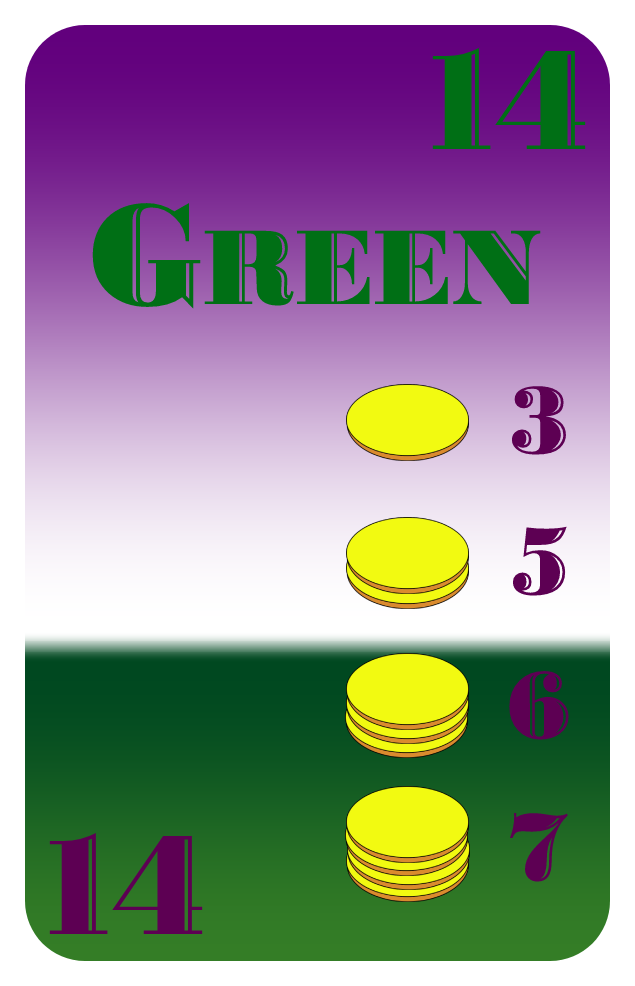
<style>
.page{position:relative;width:635px;height:986px}
.page>*{position:absolute;margin:0}
.t1{font:150px "BodoniHighlightICG";color:#006f15}
.t2{font:112px "BodoniHighlightICG";color:#006f15}
.t3{font:100px "BodoniHighlightICG";color:#5d0053}
.t4{font:150px "BodoniHighlightICG";color:#5d0053}
</style>
<div class="page">
<p class="t1" style="left:432px;top:48px;width:154px;height:101px">14</p>
<p class="t2" style="left:92px;top:203px;width:449px;height:106px"><span class="t1">G</span>REEN</p>
<p class="t3" style="left:511px;top:386px;width:55px;height:69px">3</p>
<p class="t3" style="left:512px;top:526px;width:55px;height:70px">5</p>
<p class="t3" style="left:509px;top:671px;width:60px;height:69px">6</p>
<p class="t3" style="left:510px;top:813px;width:58px;height:69px">7</p>
<p class="t4" style="left:49px;top:833px;width:154px;height:101px">14</p>
</div>
